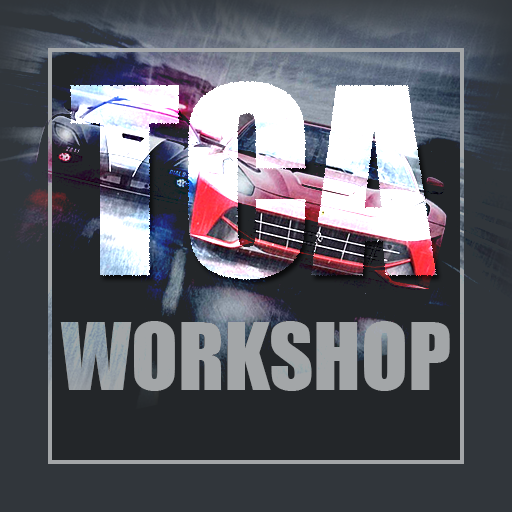
<style>
.page{position:relative;width:512px;height:512px;background:#31363b}
.page>*{position:absolute;margin:0}
.t1{font:240px "Impact";color:#ffffff}
.t2{font:12px "Tahoma";color:#a3a6a8}
.t3{font:86px "Impact";color:#a3a6a8}
</style>
<div class="page">
<p class="t1" style="left:70px;top:81px;width:367px;height:199px"><span class="t2"><br></span>TCA</p>
<p class="t3" style="left:60px;top:321px;width:390px;height:70px"><span class="t2"><br><br> <br></span>WORKSHOP</p>
</div>
